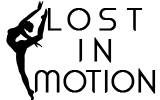
<style>
.page{position:relative;width:160px;height:100px;background:#ffffff}
.page>*{position:absolute;margin:0}
.t1{font:31.7px "ClubbedtoLife";letter-spacing:0.3em;color:#010101;text-transform:uppercase;font-weight:bold}
.t2{font:31.7px "ClubbedtoLife";letter-spacing:0.3em;color:#000000;text-transform:uppercase;font-weight:bold}
.t3{font:31.7px "ClubbedtoLife";letter-spacing:0.1em;color:#000000;text-transform:uppercase;font-weight:bold}
</style>
<div class="page">
<p class="t1" style="left:47px;top:8px;width:96px;height:23px">LOST</p>
<p class="t2" style="left:79px;top:37px;width:33px;height:26px">IN</p>
<p class="t3" style="left:34px;top:68px;width:122px;height:26px">MOTION</p>
</div>
